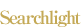
<style>
.page{position:relative;width:81px;height:27px;background:#ffffff}
.page>*{position:absolute;margin:0}
.t1{font:18px "RyuminPro-ExBold";letter-spacing:-0.095em;color:#c4a956}
</style>
<div class="page">
<p class="t1" style="left:0px;top:10px;width:81px;height:17px">Searchlight</p>
</div>
